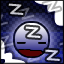
<style>
.page{position:relative;width:64px;height:64px}
.page>*{position:absolute;margin:0}
.t1{font:18px "StarAvenue"}
</style>
<div class="page">
<p class="t1" style="left:8px;top:3px;width:52px;height:58px;text-align:center;rotate:4deg">Z<br>       Z<br>               Z</p>
<p class="t1" style="left:8px;top:3px;width:52px;height:58px;text-align:center;rotate:4deg">Z<br>       Z<br>               Z</p>
</div>
